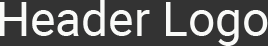
<style>
.page{position:relative;width:268px;height:46px;background:#333333}
.page>*{position:absolute;margin:0}
.t1{font:48px "Roboto-Regular";color:#f9faf8}
</style>
<div class="page">
<p class="t1" style="left:0px;top:0px;width:268px;height:46px">Header Logo</p>
</div>
